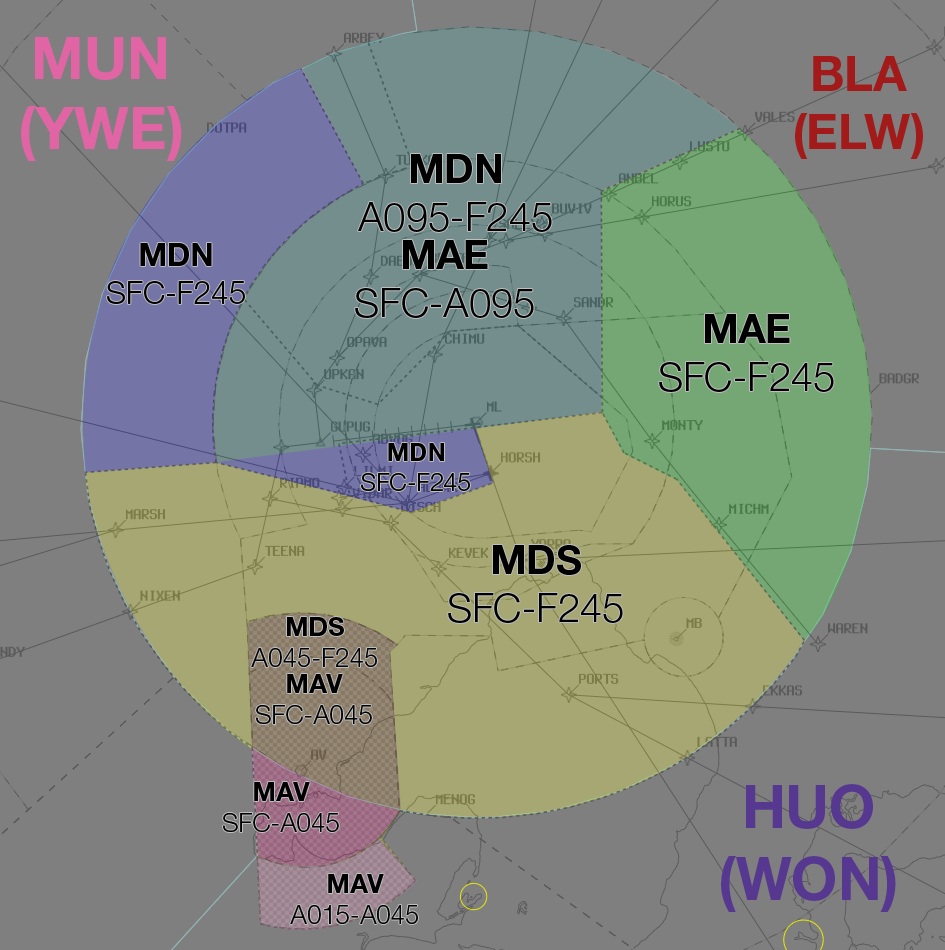
<style>
.page{position:relative;width:945px;height:950px;background:#7f7f7f}
.page>*{position:absolute;margin:0}
.t1{font:58.2px "HelveticaNeueLTStd-Bd";color:#e164a5}
.t2{font:48.9px "HelveticaNeueLTStd-Bd";color:#a31a1a}
.t3{font:40px "HelveticaNeueLTStd-Lt";color:#000000}
.t4{font:40px "HelveticaNeueLTStd-Bd";color:#000000}
.t5{font:31.4px "HelveticaNeueLTStd-Lt";color:#000000}
.t6{font:31.4px "HelveticaNeueLTStd-Bd";color:#000000}
.t7{font:24.9px "HelveticaNeueLTStd-Lt";color:#000000}
.t8{font:24.9px "HelveticaNeueLTStd-Bd";color:#000000}
.t9{font:26.3px "HelveticaNeueLTStd-Lt";color:#000000}
.t10{font:26.3px "HelveticaNeueLTStd-Bd";color:#000000}
.t11{font:59.6px "HelveticaNeueLTStd-Bd";color:#573890}
</style>
<div class="page">
<p class="t1" style="left:21px;top:37px;width:161px;height:124px;text-align:center">MUN<br>(YWE)</p>
<p class="t2" style="left:795px;top:56px;width:128px;height:103px;text-align:center">BLA<br>(ELW)</p>
<p class="t3" style="left:358px;top:154px;width:194px;height:78px;text-align:center"><span class="t4">MDN<br></span>A095-F245</p>
<p class="t5" style="left:107px;top:243px;width:138px;height:61px;text-align:center"><span class="t6">MDN<br></span>SFC-F245</p>
<p class="t3" style="left:355px;top:240px;width:179px;height:78px;text-align:center"><span class="t4">MAE<br></span>SFC-A095</p>
<p class="t3" style="left:659px;top:314px;width:175px;height:78px;text-align:center"><span class="t4">MAE<br></span>SFC-F245</p>
<p class="t7" style="left:361px;top:443px;width:109px;height:48px;text-align:center"><span class="t8">MDN<br></span>SFC-F245</p>
<p class="t3" style="left:448px;top:545px;width:175px;height:78px;text-align:center"><span class="t4">MDS<br></span>SFC-F245</p>
<p class="t9" style="left:251px;top:617px;width:126px;height:50px;text-align:center"><span class="t10">MDS<br></span>A045-F245</p>
<p class="t9" style="left:256px;top:674px;width:116px;height:50px;text-align:center"><span class="t10">MAV<br></span>SFC-A045</p>
<p class="t9" style="left:223px;top:782px;width:116px;height:50px;text-align:center"><span class="t10">MAV<br></span>SFC-A045</p>
<p class="t11" style="left:721px;top:784px;width:175px;height:128px;text-align:center">HUO<br>(WON)</p>
<p class="t9" style="left:290px;top:874px;width:128px;height:50px;text-align:center"><span class="t10">MAV<br></span>A015-A045</p>
</div>
